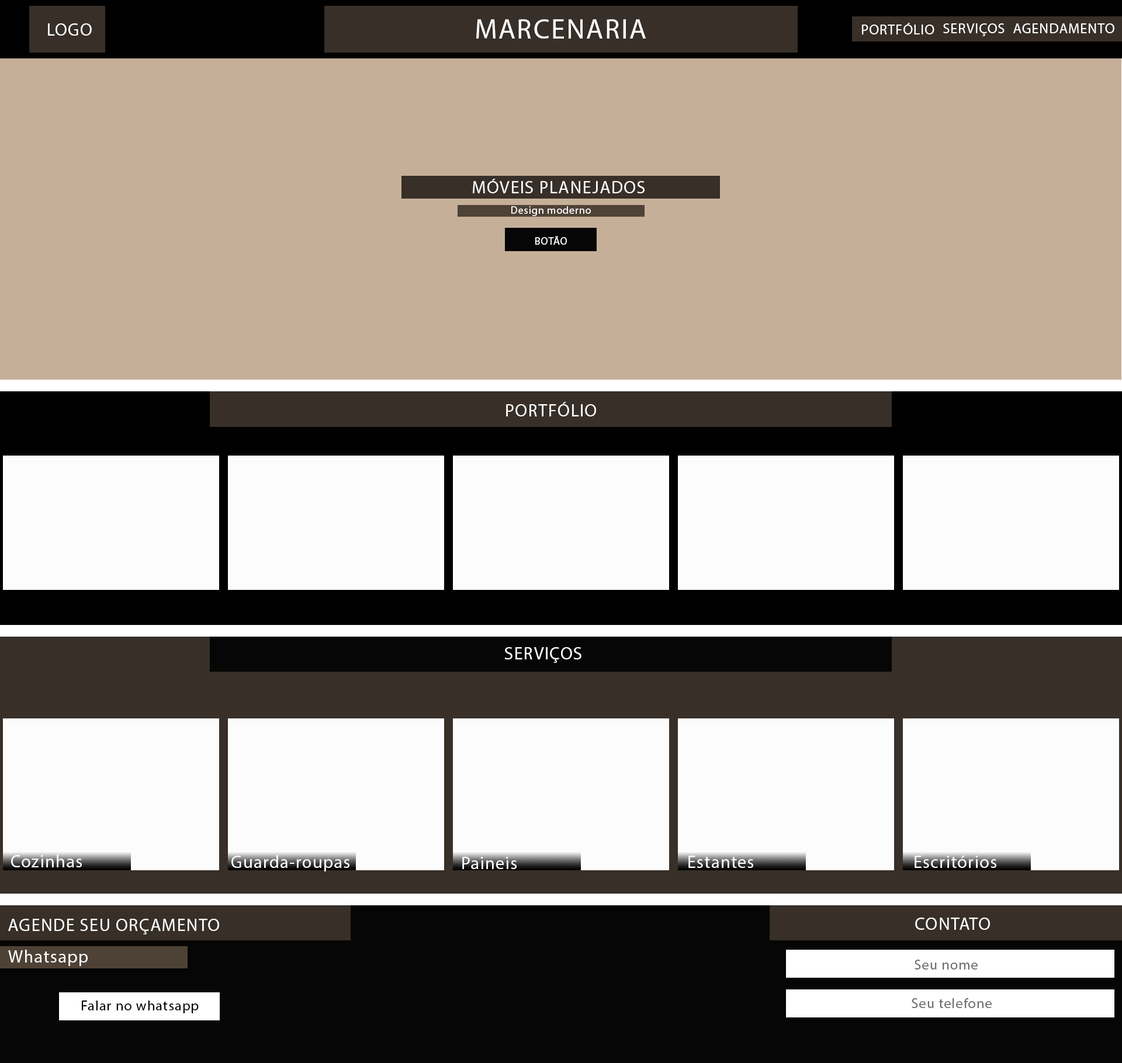
<style>
.page{position:relative;width:1122px;height:1063px;background:#c5af99}
.page>*{position:absolute;margin:0}
.t1{font:17.5px "MyriadPro-Regular";letter-spacing:0.05em;color:#ffffff}
.t2{font:28px "MyriadPro-Regular";letter-spacing:0.05em;color:#ffffff}
.t3{font:14px "MyriadPro-Regular";letter-spacing:0.05em;color:#ffffff}
.t4{font:10.5px "MyriadPro-Regular";letter-spacing:0.05em;color:#ffffff}
.t5{font:14px "MyriadPro-Regular";letter-spacing:0.05em;color:#6c6c6c}
.t6{font:14px "MyriadPro-Regular";letter-spacing:0.05em;color:#000000}
</style>
<div class="page">
<p class="t1" style="left:48px;top:23px;width:44px;height:13px">LOGO</p>
<p class="t2" style="left:476px;top:19px;width:169px;height:20px"><span class="t1"> </span>MARCENARIA</p>
<p class="t3" style="left:862px;top:23px;width:72px;height:11px">PORTFÓLIO</p>
<p class="t3" style="left:943px;top:23px;width:61px;height:13px">SERVIÇOS</p>
<p class="t3" style="left:1013px;top:23px;width:101px;height:10px">AGENDAMENTO</p>
<p class="t1" style="left:473px;top:179px;width:171px;height:14px">MÓVEIS PLANEJADOS</p>
<p class="t4" style="left:511px;top:206px;width:80px;height:10px">Design moderno</p>
<p class="t4" style="left:535px;top:236px;width:32px;height:9px">BOTÃO</p>
<p class="t1" style="left:506px;top:402px;width:90px;height:15px">PORTFÓLIO</p>
<p class="t1" style="left:504px;top:647px;width:77px;height:16px">SERVIÇOS</p>
<p class="t1" style="left:11px;top:855px;width:71px;height:12px">Cozinhas</p>
<p class="t1" style="left:231px;top:855px;width:118px;height:17px">Guarda-roupas</p>
<p class="t1" style="left:462px;top:857px;width:54px;height:12px">Paineis</p>
<p class="t1" style="left:688px;top:856px;width:65px;height:12px">Estantes</p>
<p class="t1" style="left:914px;top:856px;width:82px;height:12px">Escritórios</p>
<p class="t1" style="left:915px;top:918px;width:75px;height:12px">CONTATO</p>
<p class="t1" style="left:8px;top:919px;width:211px;height:16px">AGENDE SEU ORÇAMENTO</p>
<p class="t1" style="left:8px;top:950px;width:80px;height:16px">Whatsapp</p>
<p class="t5" style="left:914px;top:960px;width:63px;height:10px">Seu nome</p>
<p class="t6" style="left:82px;top:1001px;width:117px;height:13px">Falar no whatsapp</p>
<p class="t5" style="left:911px;top:998px;width:80px;height:10px">Seu telefone</p>
</div>
